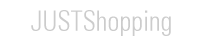
<style>
.page{position:relative;width:200px;height:40px;background:#ffffff}
.page>*{position:absolute;margin:0}
.t1{font:28px "Univeconlig";color:#cccccc;scale:0.95 1}
</style>
<div class="page">
<p class="t1" style="left:31px;top:10px;width:140px;height:26px">JUSTShopping</p>
</div>
